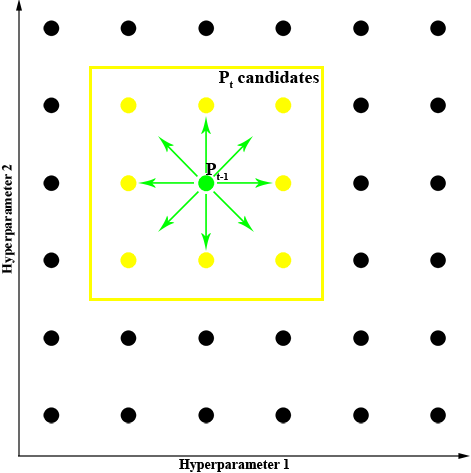
<style>
.page{position:relative;width:471px;height:473px;background:#ffffff}
.page>*{position:absolute;margin:0}
.t1{font:18px "TimesNewRomanPS-BoldMT";color:#000000}
.t2{font:24px "TimesNewRomanPS-BoldMT";color:#000000}
</style>
<div class="page">
<p class="t1" style="left:219px;top:71px;width:100px;height:17px">Pt candidates</p>
<p class="t2" style="left:1px;top:164px;width:14px;height:110px;rotate:-90deg">Hyperparameter 2</p>
<p class="t1" style="left:206px;top:163px;width:22px;height:17px">Pt-1</p>
<p class="t2" style="left:179px;top:459px;width:110px;height:13px">Hyperparameter 1</p>
</div>
